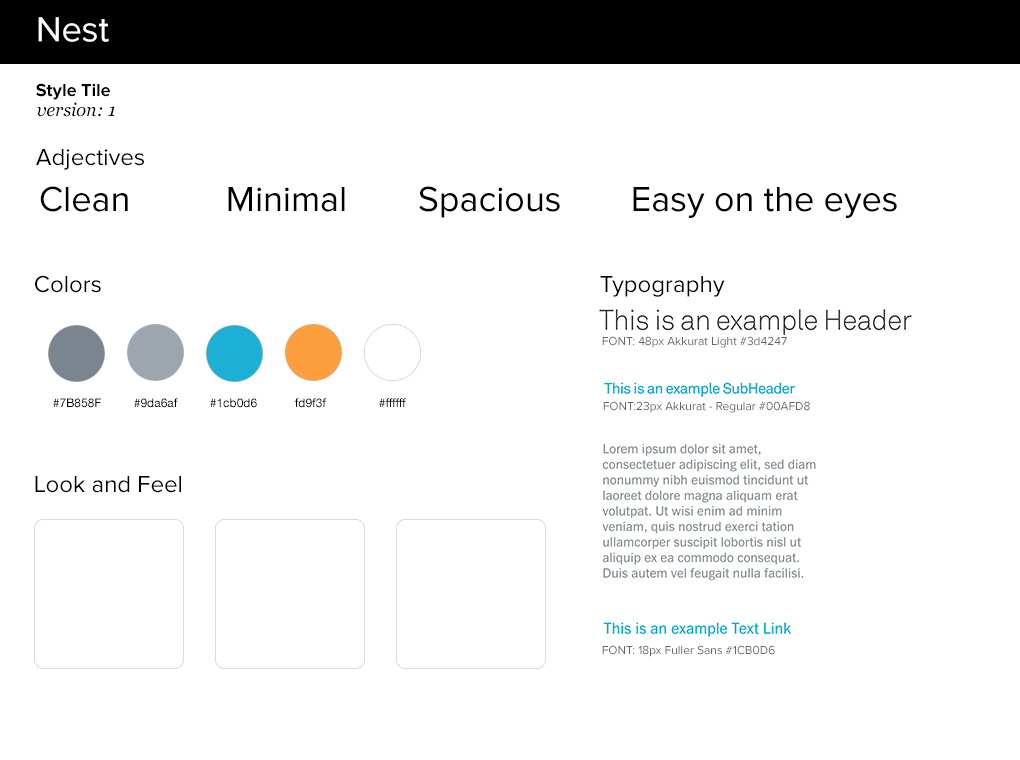
<style>
.page{position:relative;width:1020px;height:760px;background:#ffffff}
.page>*{position:absolute;margin:0}
.t1{font:36px "ProximaNova-Regular";color:#ffffff}
.t2{font:18px "ProximaNova-Bold";color:#000000}
.t3{font:18px "Georgia-Italic";color:#000000}
.t4{font:24px "ProximaNova-Regular";color:#000000}
.t5{font:36px "ProximaNova-Regular";color:#000000}
.t6{font:12px "ProximaNova-Regular";color:#666666}
.t7{font:12px "HelveticaNeue";color:#000000}
</style>
<div class="page">
<p class="t1" style="left:38px;top:17px;width:71px;height:25px">Nest</p>
<p class="t2" style="left:36px;top:83px;width:74px;height:17px">Style Tile</p>
<p class="t3" style="left:37px;top:102px;width:78px;height:15px">version: 1</p>
<p class="t4" style="left:36px;top:149px;width:108px;height:21px">Adjectives</p>
<p class="t5" style="left:40px;top:186px;width:88px;height:26px">Clean</p>
<p class="t5" style="left:228px;top:187px;width:117px;height:25px">Minimal</p>
<p class="t5" style="left:419px;top:186px;width:141px;height:32px">Spacious</p>
<p class="t5" style="left:633px;top:187px;width:264px;height:31px">Easy on the eyes</p>
<p class="t4" style="left:35px;top:275px;width:66px;height:18px">Colors</p>
<p class="t4" style="left:600px;top:276px;width:125px;height:21px">Typography</p>
<p class="t6" style="left:602px;top:336px;width:185px;height:12px">FONT: 48px Akkurat Light #3d4247</p>
<p class="t7" style="left:53px;top:398px;width:48px;height:10px">#7B858F</p>
<p class="t7" style="left:134px;top:398px;width:44px;height:10px">#9da6af</p>
<p class="t7" style="left:210px;top:398px;width:47px;height:10px">#1cb0d6</p>
<p class="t7" style="left:295px;top:398px;width:31px;height:10px">fd9f3f</p>
<p class="t7" style="left:379px;top:398px;width:27px;height:9px">#ffffff</p>
<p class="t6" style="left:603px;top:401px;width:207px;height:12px">FONT:23px Akkurat - Regular #00AFD8</p>
<p class="t4" style="left:35px;top:476px;width:146px;height:17px">Look and Feel</p>
<p class="t6" style="left:602px;top:645px;width:173px;height:12px">FONT: 18px Fuller Sans #1CB0D6</p>
</div>
